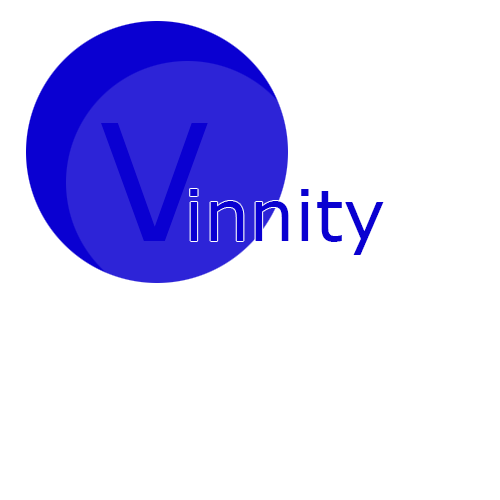
<style>
.page{position:relative;width:500px;height:500px;background:#ffffff}
.page>*{position:absolute;margin:0}
.t1{font:162px "Verdana";color:#0a00d1}
.t2{font:72px "Verdana";color:#0a00d1}
</style>
<div class="page">
<p class="t1" style="left:101px;top:123px;width:107px;height:118px">V</p>
<p class="t2" style="left:190px;top:189px;width:194px;height:66px">innity</p>
</div>
